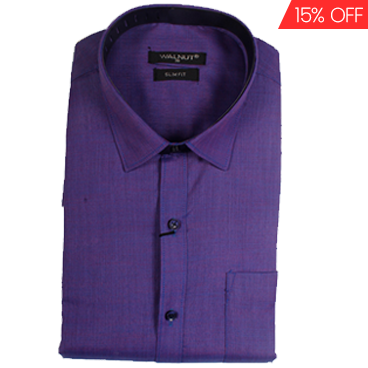
<style>
.page{position:relative;width:368px;height:368px;background:#ffffff}
.page>*{position:absolute;margin:0}
.t1{font:20px "Poppins-ExtraLight";letter-spacing:-0.025em;color:#ffffff}
</style>
<div class="page">
<p class="t1" style="left:295px;top:7px;width:68px;height:16px">15% OFF</p>
</div>
